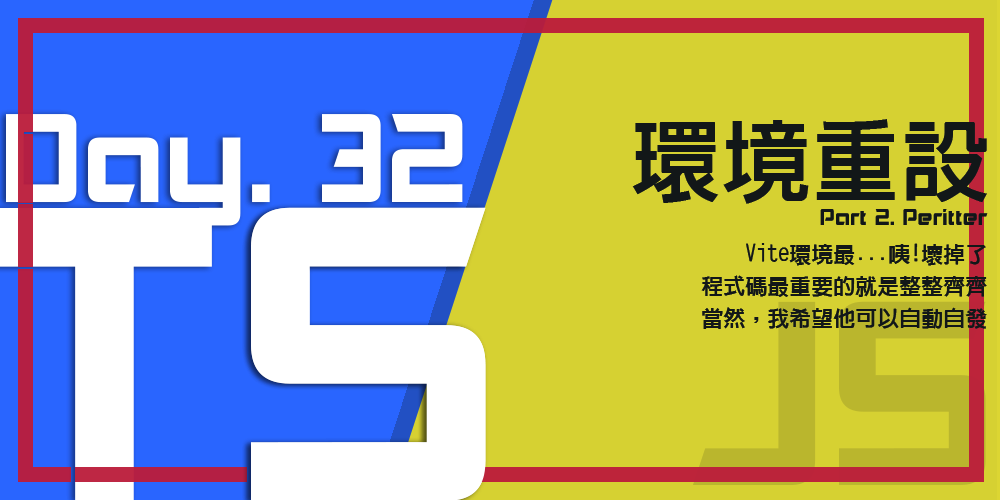
<style>
.page{position:relative;width:1000px;height:500px;background:#d6d132}
.page>*{position:absolute;margin:0}
.t1{font:120px "Akashi";color:#ffffff}
.t2{font:90px "linGothic-Extra";color:#121718}
.t3{font:22px "Akashi";color:#121718}
.t4{font:22px/32px "linGothic-Extra";color:#121718}
</style>
<div class="page">
<p class="t1" style="left:322px;top:114px;width:141px;height:88px">32</p>
<p class="t2" style="left:632px;top:119px;width:355px;height:85px">環境重設</p>
<p class="t3" style="left:820px;top:209px;width:168px;height:16px">Part 2. Peritter</p>
<p class="t4" style="left:701px;top:243px;width:286px;height:86px;text-align:right">Vite環境最...咦!壞掉了<br>程式碼最重要的就是整整齊齊<br>當然，我希望他可以自動自發</p>
</div>
